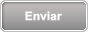
<style>
.page{position:relative;width:88px;height:32px}
.page>*{position:absolute;margin:0}
.t1{font:12px "Arial-BoldMT";color:#fffefe}
</style>
<div class="page">
<p class="t1" style="left:25px;top:11px;width:37px;height:10px">Enviar</p>
</div>
